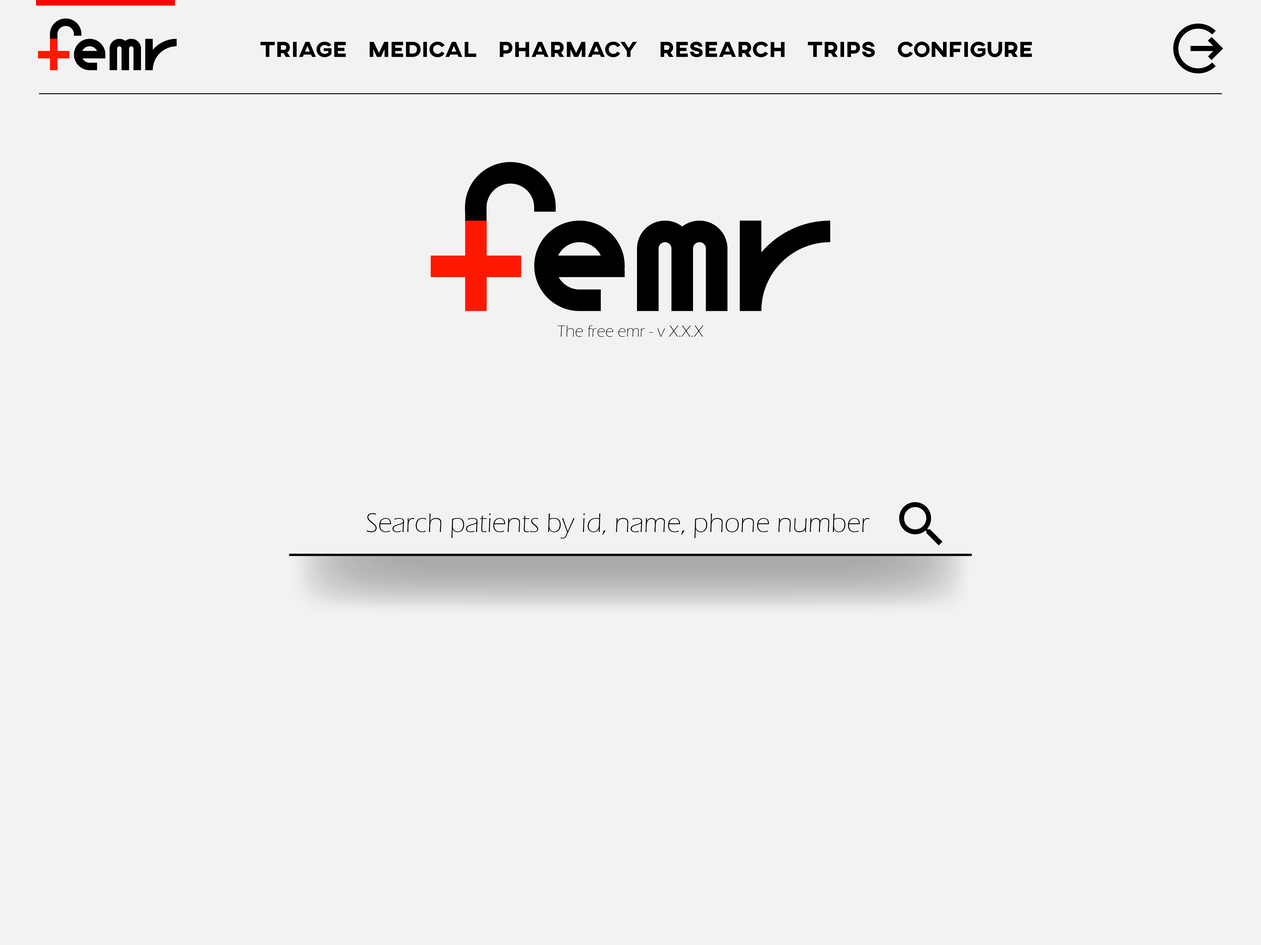
<style>
.page{position:relative;width:1261px;height:945px;background:#f2f2f2}
.page>*{position:absolute;margin:0}
.t1{font:22.2px "AXIS-ExtraBold";color:#000000}
.t2{font:16.6px "ErasITC-Light";color:#000000}
.t3{font:27.7px "ErasITC-Light";color:#000000}
</style>
<div class="page">
<p class="t1" style="left:260px;top:41px;width:772px;height:16px">Triage    Medical    Pharmacy    Research    Trips    Configure</p>
<p class="t2" style="left:558px;top:325px;width:146px;height:12px">The free emr - v X.X.X</p>
<p class="t3" style="left:367px;top:513px;width:502px;height:26px">Search patients by id, name, phone number</p>
</div>
